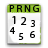
<style>
.page{position:relative;width:48px;height:48px;background:#ffffff}
.page>*{position:absolute;margin:0}
.t1{font:12px "MyriadPro-Regular";color:#060606}
.t2{font:10px "MyriadPro-Regular";color:#000000}
.t3{font:10px "MyriadPro-Regular";color:#060606}
</style>
<div class="page">
<p class="t1" style="left:12px;top:16px;width:4px;height:8px">1</p>
<p class="t1" style="left:21px;top:17px;width:6px;height:8px">2</p>
<p class="t2" style="left:9px;top:27px;width:6px;height:7px">4</p>
<p class="t3" style="left:30px;top:20px;width:5px;height:7px">3</p>
<p class="t2" style="left:18px;top:33px;width:6px;height:7px">5</p>
<p class="t3" style="left:30px;top:31px;width:5px;height:7px">6</p>
</div>
